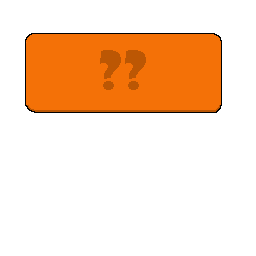
<style>
.page{position:relative;width:256px;height:256px;background:#ffffff}
.page>*{position:absolute;margin:0}
.t1{font:50px "ShowcardGothic-Reg";color:#bc5704}
</style>
<div class="page">
<p class="t1" style="left:100px;top:50px;width:46px;height:40px">??</p>
</div>
